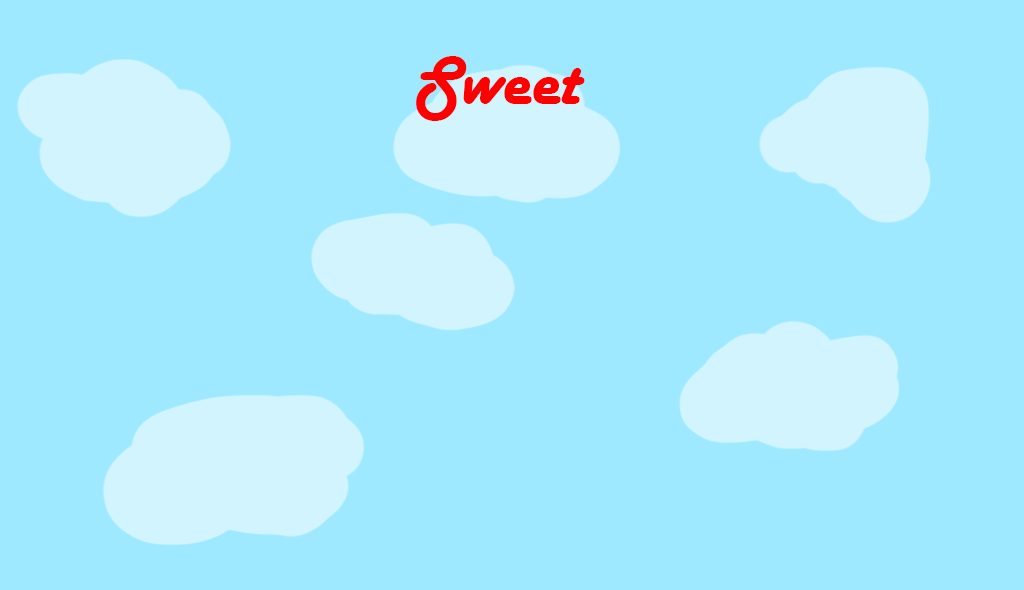
<style>
.page{position:relative;width:1024px;height:590px;background:#9ee9ff}
.page>*{position:absolute;margin:0}
.t1{font:72px "HarlowSolid";color:#ff0000}
</style>
<div class="page">
<p class="t1" style="left:416px;top:56px;width:169px;height:65px">Sweet</p>
</div>
